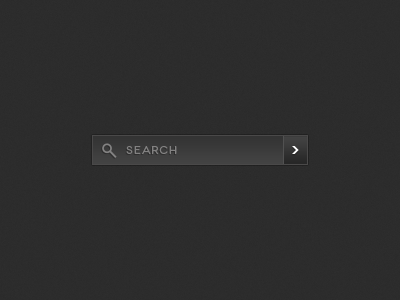
<style>
.page{position:relative;width:400px;height:300px;background:#2c2c2c}
.page>*{position:absolute;margin:0}
.t1{font:11px "Novecentowide-Normal";letter-spacing:0.1em;color:#828181}
</style>
<div class="page">
<p class="t1" style="left:126px;top:146px;width:51px;height:8px">Search</p>
</div>
